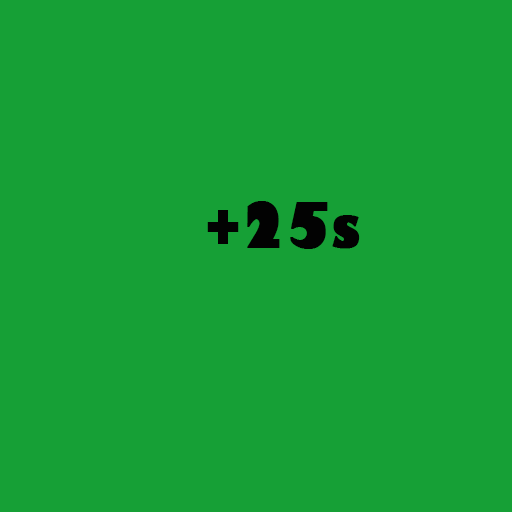
<style>
.page{position:relative;width:512px;height:512px;background:#16a036}
.page>*{position:absolute;margin:0}
.t1{font:60px "GillSans-UltraBoldCondensed";color:#020202;font-variant:small-caps;font-weight:bold;scale:1.25 1}
</style>
<div class="page">
<p class="t1" style="left:207px;top:201px;width:153px;height:48px">+25s</p>
</div>
